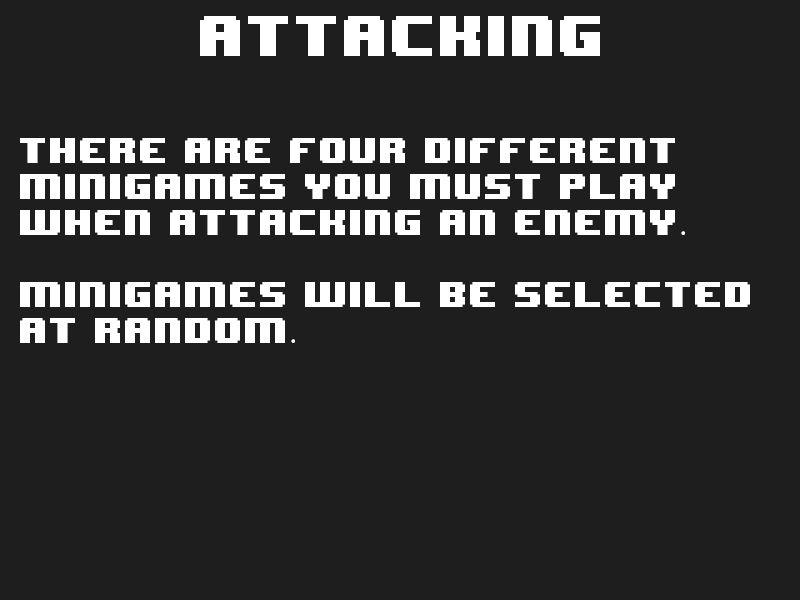
<style>
.page{position:relative;width:800px;height:600px;background:#1e1e1e}
.page>*{position:absolute;margin:0}
.t1{font:48px "8BITWONDERNominal";color:#ffffff}
.t2{font:30px "8BITWONDERNominal";color:#ffffff}
.t3{font:30px "MyriadPro-Regular";color:#ffffff}
</style>
<div class="page">
<p class="t1" style="left:200px;top:16px;width:400px;height:40px">attacking</p>
<p class="t2" style="left:20px;top:138px;width:730px;height:205px">there are four different<br>minigames you must play<br>when attacking an enemy<span class="t3">.<br><br></span>minigames will be selected<br>at random<span class="t3">.</span></p>
</div>
